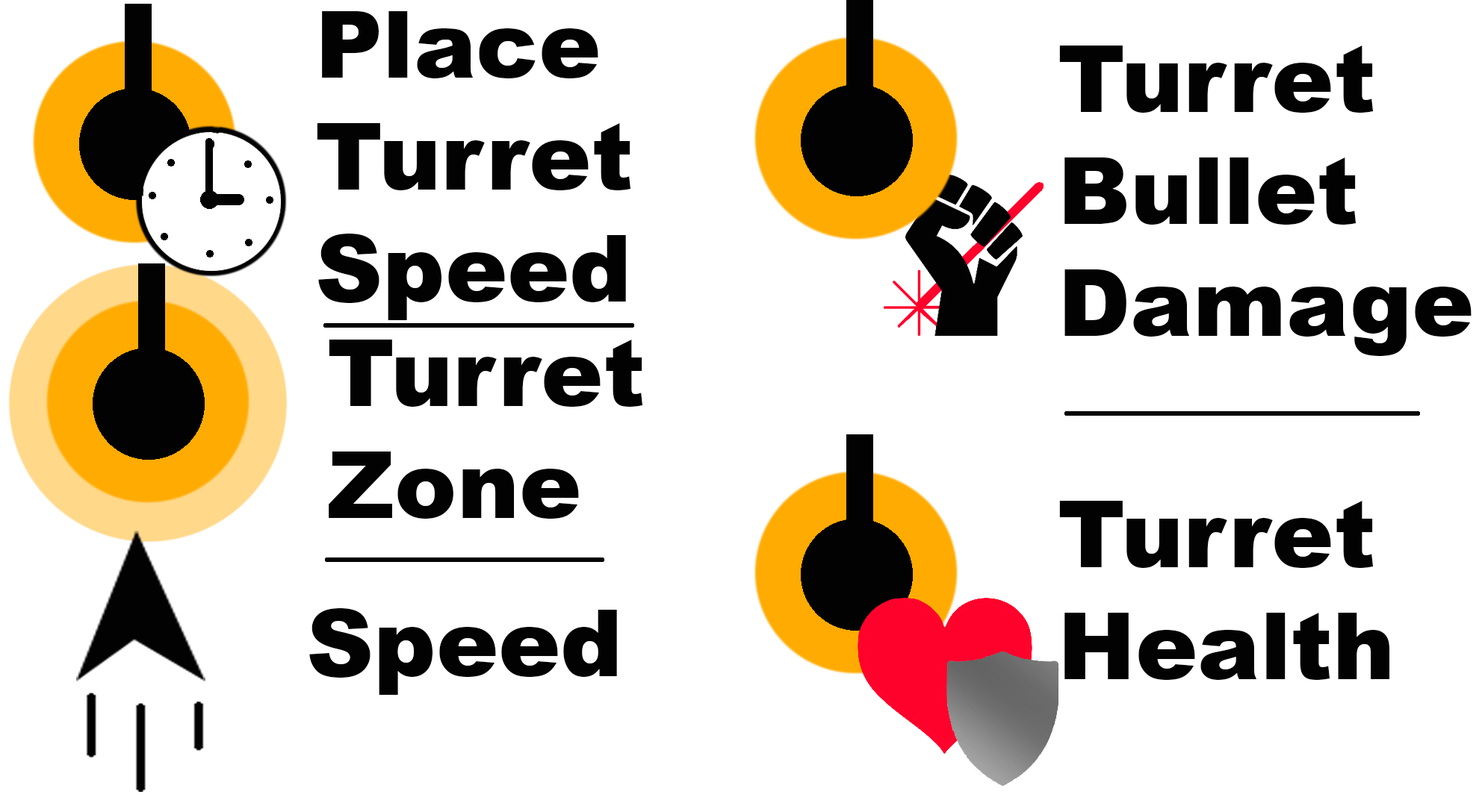
<style>
.page{position:relative;width:1479px;height:806px;background:#ffffff}
.page>*{position:absolute;margin:0}
.t1{font:93.3px "Arial-Black";color:#020202}
</style>
<div class="page">
<p class="t1" style="left:317px;top:11px;width:314px;height:309px">Place<br>Turret<br>Speed</p>
<p class="t1" style="left:1059px;top:46px;width:412px;height:310px">Turret<br>Bullet<br>Damage</p>
<p class="t1" style="left:329px;top:340px;width:314px;height:179px">Turret<br>Zone</p>
<p class="t1" style="left:1059px;top:501px;width:331px;height:179px">Turret<br>Health</p>
<p class="t1" style="left:309px;top:609px;width:308px;height:86px">Speed</p>
</div>
